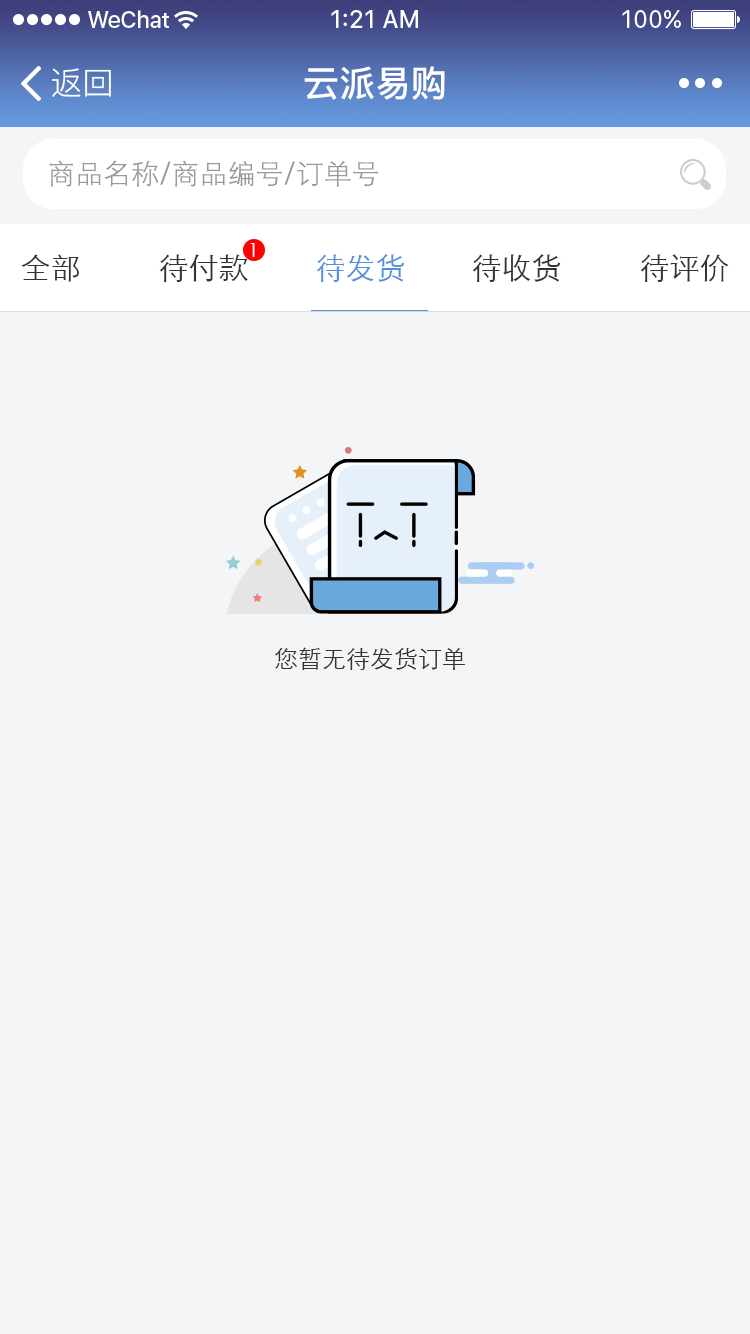
<style>
.page{position:relative;width:750px;height:1334px;background:#f4f5f6}
.page>*{position:absolute;margin:0}
.t1{font:32px "PingFang-SC-Regular";color:#ffffff}
.t2{font:36px "PingFang-SC-Bold";color:#ffffff}
.t3{font:28px "STXihei";color:#999999}
.t4{font:20px "STXihei";color:#ffffff}
.t5{font:30px "STXihei";color:#333333}
.t6{font:30px "STXihei";color:#568fdc}
.t7{font:24px "STXihei";color:#333333}
</style>
<div class="page">
<p class="t1" style="left:52px;top:68px;width:59px;height:29px">返回</p>
<p class="t2" style="left:304px;top:66px;width:141px;height:34px">云派易购</p>
<p class="t3" style="left:49px;top:160px;width:329px;height:27px">商品名称/商品编号/订单号</p>
<p class="t4" style="left:250px;top:243px;width:5px;height:14px">1</p>
<p class="t5" style="left:21px;top:254px;width:58px;height:28px">全部</p>
<p class="t5" style="left:159px;top:254px;width:89px;height:28px">待付款</p>
<p class="t6" style="left:316px;top:254px;width:89px;height:28px">待发货</p>
<p class="t5" style="left:472px;top:254px;width:89px;height:28px">待收货</p>
<p class="t5" style="left:640px;top:254px;width:89px;height:28px">待评价</p>
<p class="t7" style="left:275px;top:647px;width:190px;height:23px">您暂无待发货订单</p>
</div>
